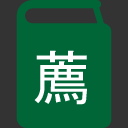
<style>
.page{position:relative;width:128px;height:128px;background:#006638}
.page>*{position:absolute;margin:0}
.t1{font:59.8px "MS-Gothic";color:#ffffff}
</style>
<div class="page">
<p class="t1" style="left:34px;top:50px;width:53px;height:55px">薦</p>
</div>
